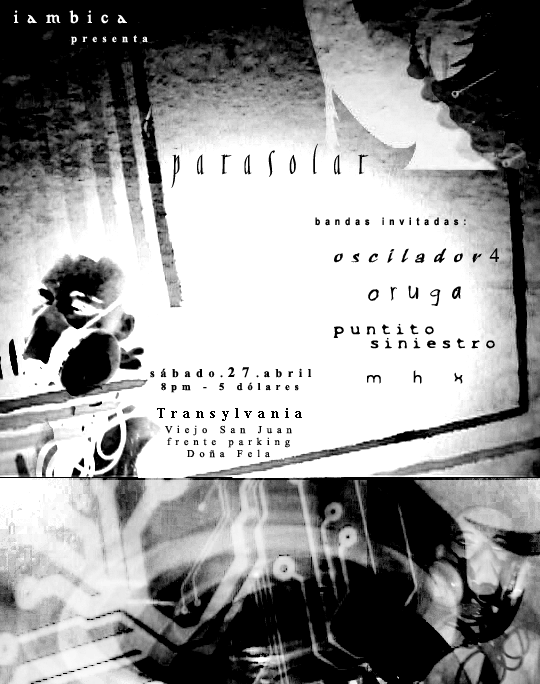
<style>
.page{position:relative;width:540px;height:684px;background:#ffffff}
.page>*{position:absolute;margin:0}
.t1{font:18px "EccentricBold";letter-spacing:0.475em;color:#ffffff}
.t2{font:11px "TimesNewRomanPS-BoldMT";letter-spacing:0.475em;color:#ffffff}
.t3{font:36px "Ranegund";letter-spacing:0.475em;color:#010101}
.t4{font:10.4px "ArialNarrow-Bold";letter-spacing:0.475em;color:#000000}
.t5{font:20px "RuachLetPlain";letter-spacing:0.475em;color:#010101}
.t6{font:20px "TimesNewRomanPSMT";letter-spacing:0.475em;color:#010101}
.t7{font:24px "Psycho-Poetry-Regular";letter-spacing:0.475em;color:#000000}
.t8{font:14px "X-Files-Regular";letter-spacing:0.475em;color:#000000}
.t9{font:14px "X-Files-Regular";letter-spacing:0.475em;color:#010101}
.t10{font:12px "TimesNewRomanPS-BoldMT";letter-spacing:0.475em;color:#010101}
.t11{font:10.4px "TimesNewRomanPS-BoldMT";letter-spacing:0.475em;color:#010101}
.t12{font:14.6px "TimesNewRomanPS-BoldMT";letter-spacing:0.475em;color:#010101}
.t13{font:25px "Frazzed";letter-spacing:0.475em;color:#000000}
.t14{font:13.3px "TimesNewRomanPS-BoldMT";letter-spacing:0.475em;color:#010101}
.t15{font:10.4px "TimesNewRomanPSMT";letter-spacing:0.475em;color:#000000}
.t16{font:10.4px "TimesNewRomanPSMT";letter-spacing:0.475em;color:#010101}
</style>
<div class="page">
<p class="t1" style="left:13px;top:10px;width:114px;height:14px">iambica</p>
<p class="t2" style="left:71px;top:35px;width:77px;height:10px">presenta</p>
<p class="t3" style="left:171px;top:143px;width:198px;height:45px">parasolar</p>
<p class="t4" style="left:315px;top:217px;width:151px;height:9px">bandas invitadas:</p>
<p class="t5" style="left:334px;top:248px;width:165px;height:15px">oscilador<span class="t6">4</span></p>
<p class="t7" style="left:368px;top:285px;width:93px;height:21px">oruga</p>
<p class="t8" style="left:333px;top:323px;width:101px;height:15px">puntito</p>
<p class="t9" style="left:370px;top:337px;width:125px;height:12px">siniestro</p>
<p class="t10" style="left:150px;top:367px;width:162px;height:11px">sábado<span class="t11">.</span><span class="t12">27</span><span class="t11">.</span>abril</p>
<p class="t13" style="left:367px;top:370px;width:96px;height:14px">m h x</p>
<p class="t11" style="left:161px;top:382px;width:138px;height:11px">8pm - 5 dólares</p>
<p class="t14" style="left:157px;top:408px;width:145px;height:13px">Transylvania</p>
<p class="t15" style="left:165px;top:425px;width:127px;height:11px">Viejo San Juan</p>
<p class="t16" style="left:167px;top:437px;width:123px;height:11px">frente parking</p>
<p class="t16" style="left:187px;top:449px;width:83px;height:9px">Doña Fela</p>
</div>
